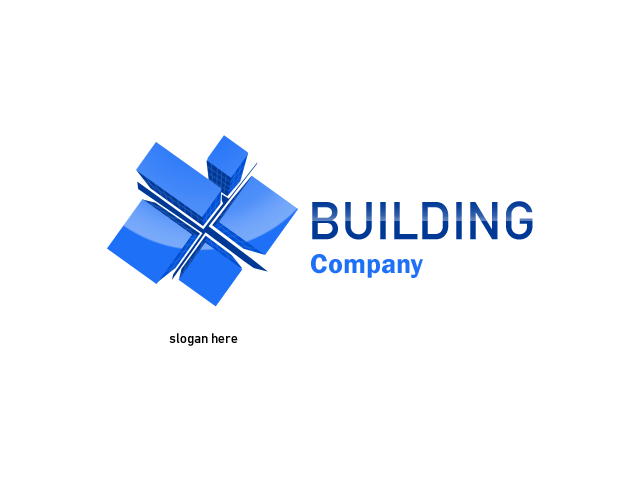
<style>
.page{position:relative;width:640px;height:480px;background:#ffffff}
.page>*{position:absolute;margin:0}
.t1{font:53px "font134";color:#003895}
.t2{font:28px "font152";color:#1e70f7}
.t3{font:14px "font134";color:#000000}
</style>
<div class="page">
<p class="t1" style="left:312px;top:201px;width:221px;height:39px">BUILDING</p>
<p class="t2" style="left:311px;top:254px;width:112px;height:24px">Company</p>
<p class="t3" style="left:169px;top:333px;width:69px;height:13px">slogan here</p>
</div>
